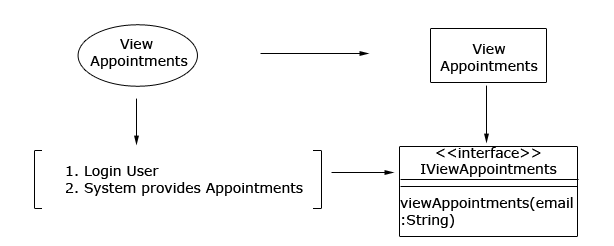
<style>
.page{position:relative;width:614px;height:246px;background:#ffffff}
.page>*{position:absolute;margin:0}
.t1{font:14px "Verdana";color:#000000}
</style>
<div class="page">
<p class="t1" style="left:90px;top:39px;width:98px;height:30px;text-align:center">View <br>Appointments</p>
<p class="t1" style="left:440px;top:44px;width:98px;height:30px;text-align:center">View<br>Appointments</p>
<p class="t1" style="left:400px;top:147px;width:173px;height:81px;text-align:center">&lt;&lt;interface&gt;&gt;<br>IViewAppointments<br><br>viewAppointments(email:String)</p>
<p class="t1" style="left:66px;top:166px;width:237px;height:30px">1. Login User<br>2. System provides Appointments</p>
</div>
